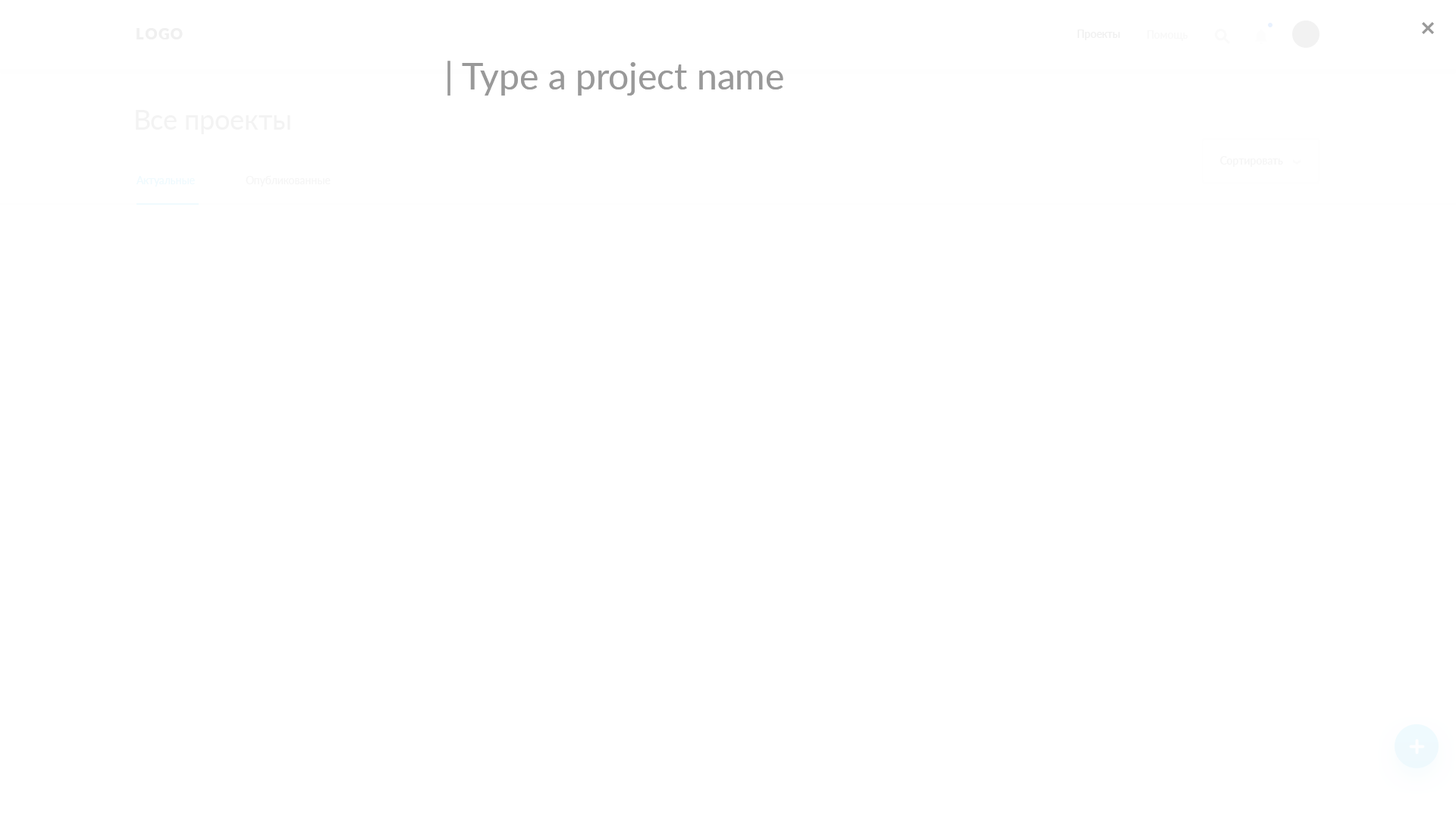
<style>
.page{position:relative;width:1456px;height:819px;background:#ffffff}
.page>*{position:absolute;margin:0}
.t1{font:15.2px "Lato-Black";letter-spacing:0.08em;color:#f0f0f0;text-transform:uppercase}
.t2{font:10.8px "Lato-Semibold";color:#f0f0f0}
.t3{font:10.8px "Lato-Semibold";color:#f8f8f8}
.t4{font:36.4px "Lato-Regular";color:#999999}
.t5{font:27.4px "Lato-Regular";color:#f3f3f3}
.t6{font:10.7px "Lato-Semibold";color:#f5f5f5}
.t7{font:10.6px "Lato-Regular";color:#effafe}
.t8{font:10.6px "Lato-Regular";color:#f5f5f5}
</style>
<div class="page">
<p class="t1" style="left:136px;top:28px;width:47px;height:11px">logo</p>
<p class="t2" style="left:1078px;top:30px;width:42px;height:10px">Проекты</p>
<p class="t3" style="left:1147px;top:30px;width:41px;height:11px">Помощь</p>
<p class="t4" style="left:447px;top:61px;width:336px;height:35px">| Type a project name</p>
<p class="t5" style="left:136px;top:110px;width:154px;height:24px">Все проекты</p>
<p class="t6" style="left:1220px;top:156px;width:63px;height:11px">Сортировать</p>
<p class="t7" style="left:136px;top:176px;width:59px;height:11px">Актуальные</p>
<p class="t8" style="left:246px;top:175px;width:85px;height:12px">Опубликованные</p>
</div>
